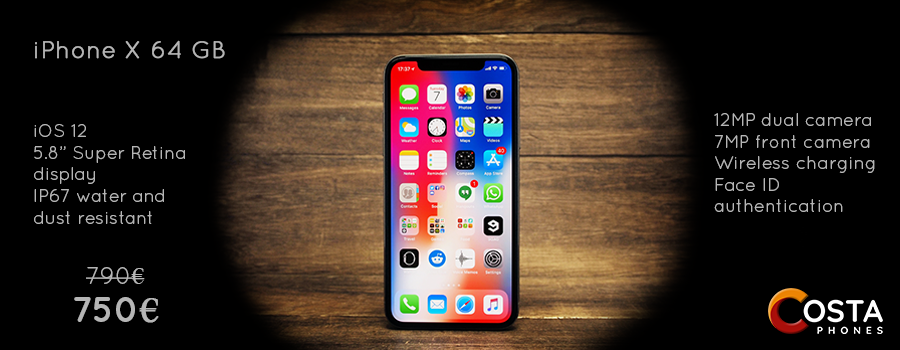
<style>
.page{position:relative;width:900px;height:350px;background:#000000}
.page>*{position:absolute;margin:0}
.t1{font:18px "Quicksand-Regular";color:#b5b5b5}
.t2{font:24px "Quicksand-Regular";color:#b5b5b5;font-weight:bold}
.t3{font:24px "Quicksand-Regular";color:#b5b5b5}
.t4{font:24px "TimesNewRomanPSMT";color:#b5b5b5}
.t5{font:36px "Quicksand-Bold";color:#b5b5b5}
.t6{font:36px "TimesNewRomanPSMT";color:#b5b5b5;font-weight:bold}
</style>
<div class="page">
<p class="t1" style="left:34px;top:40px;width:191px;height:184px"><span class="t2">iPhone X 64 GB<br><br><br></span>iOS 12<br>5.8” Super Retina <br>display<br>IP67 water and <br>dust resistant</p>
<p class="t1" style="left:714px;top:113px;width:161px;height:99px">12MP dual camera<br>7MP front camera<br>Wireless charging<br>Face ID <br>authentication</p>
<p class="t3" style="left:86px;top:267px;width:59px;height:17px">790<span class="t4">€</span></p>
<p class="t5" style="left:74px;top:297px;width:85px;height:26px">750<span class="t6">€</span></p>
</div>
